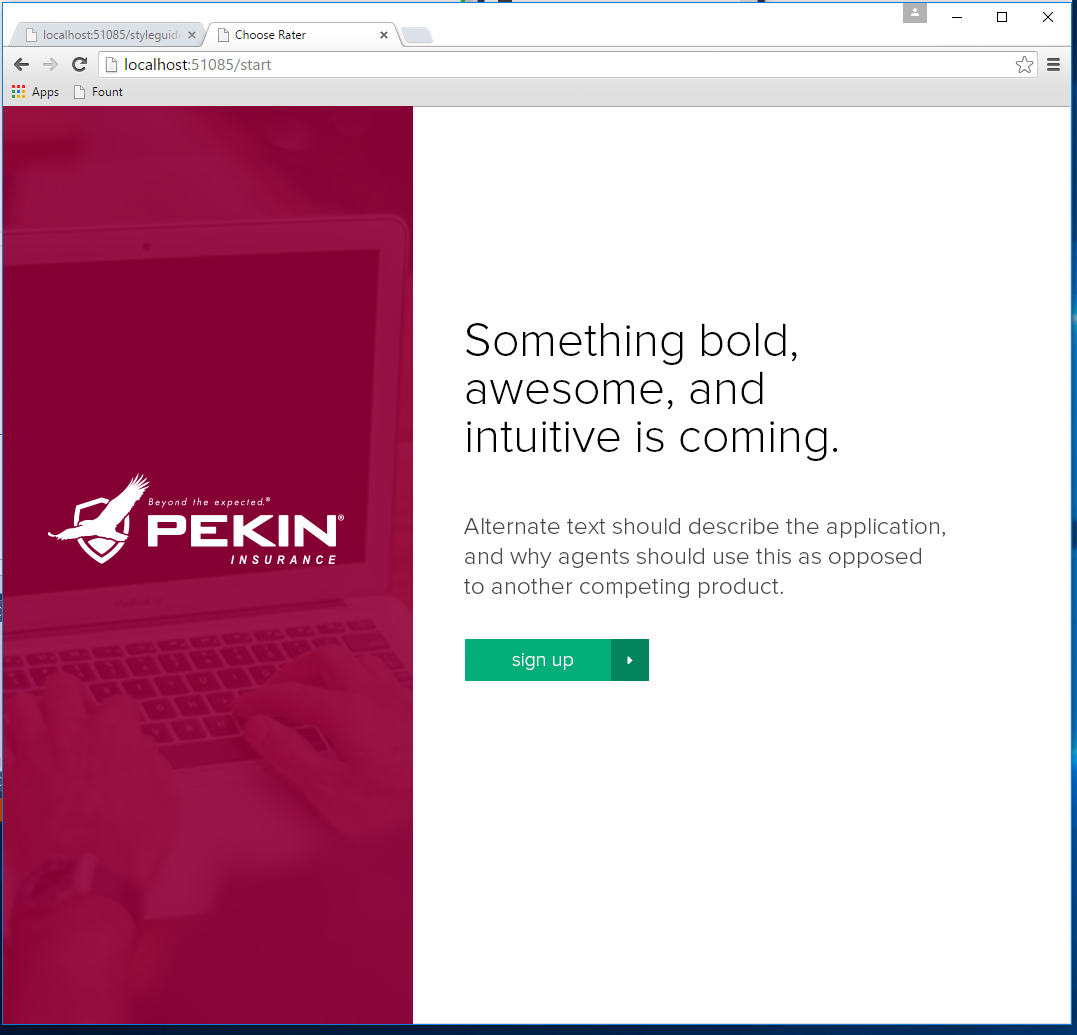
<style>
.page{position:relative;width:1077px;height:1035px;background:#ffffff}
.page>*{position:absolute;margin:0}
.t1{font:48px/48px "ProximaNova-Light";color:#000000}
.t2{font:24px/30px "ProximaNova-Light";color:#494949}
.t3{font:20px "ProximaNova-Light";color:#ffffff}
</style>
<div class="page">
<p class="t1" style="left:466px;top:323px;width:372px;height:138px">Something bold,<br>awesome, and <br>intuitive is coming.</p>
<p class="t2" style="left:464px;top:517px;width:481px;height:81px">Alternate text should describe the application,<br>and why agents should use this as opposed<br>to another competing product.</p>
<p class="t3" style="left:512px;top:653px;width:61px;height:17px">sign up</p>
</div>
